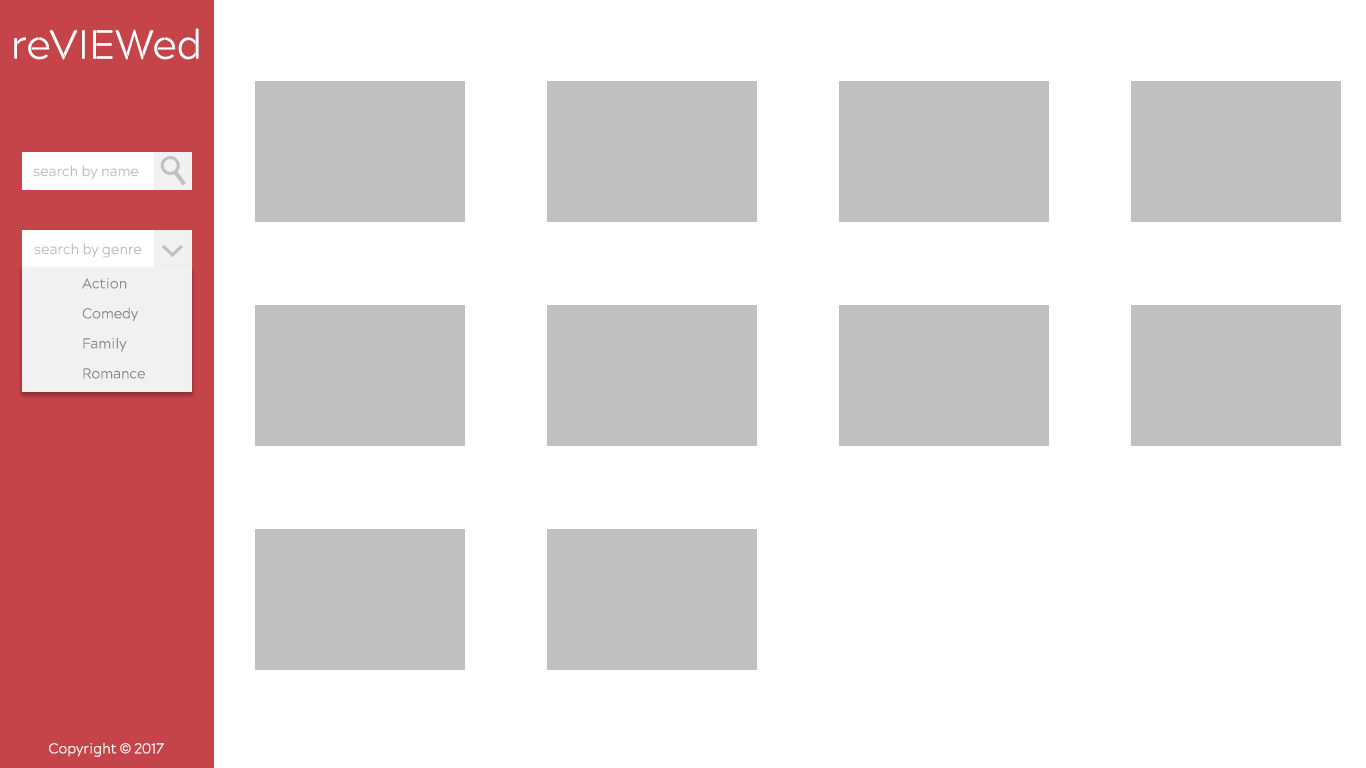
<style>
.page{position:relative;width:1366px;height:768px;background:#ffffff}
.page>*{position:absolute;margin:0}
.t1{font:40.6px "AcherusMilitant1-Light";color:#ffffff}
.t2{font:14px "AcherusMilitant1-Light";color:#c0c0c0}
.t3{font:14px/30px "AcherusMilitant1-Light";color:#8b8b8b}
.t4{font:14px "AcherusMilitant1-Light";color:#f2f2f2}
.t5{font:14px "Helvetica";color:#f2f2f2}
</style>
<div class="page">
<p class="t1" style="left:14px;top:28px;width:185px;height:32px">reVIEWed</p>
<p class="t2" style="left:33px;top:165px;width:106px;height:14px">search by name</p>
<p class="t2" style="left:34px;top:243px;width:108px;height:15px">search by genre</p>
<p class="t3" style="left:82px;top:278px;width:63px;height:101px">Action<br>Comedy<br>Family<br>Romance</p>
<p class="t4" style="left:49px;top:742px;width:115px;height:15px">Copyright <span class="t5">©</span> 2017</p>
</div>
